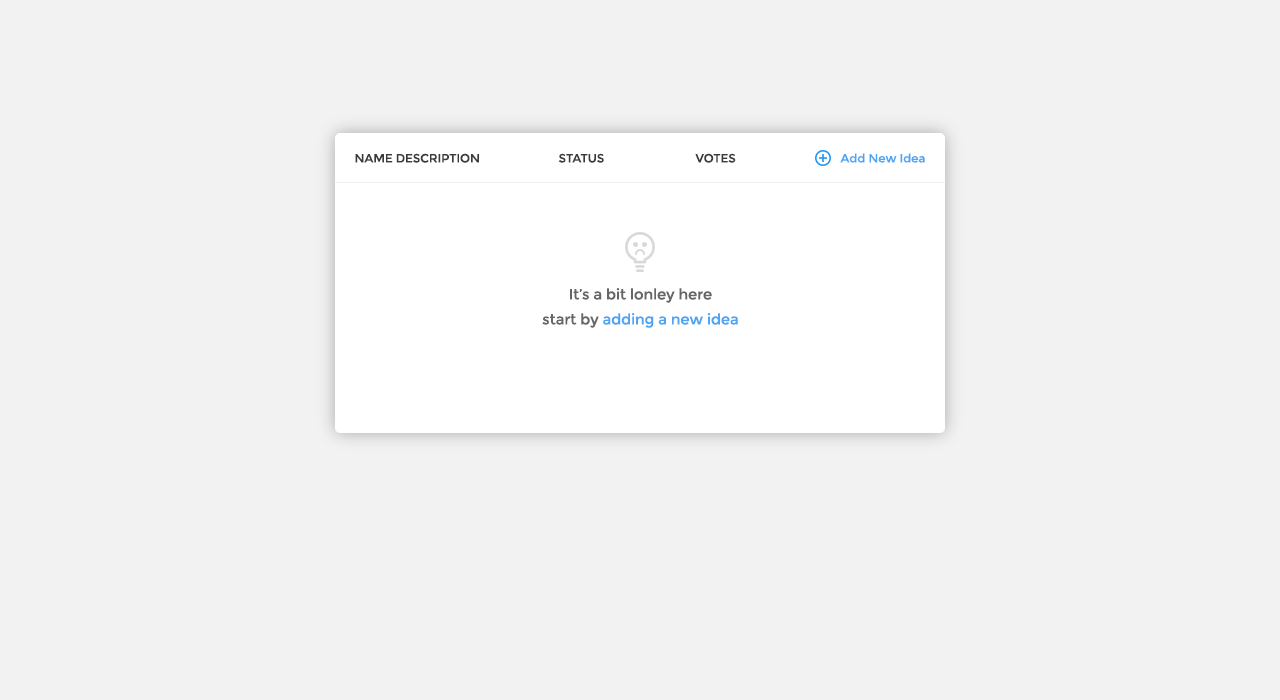
<style>
.page{position:relative;width:1280px;height:700px;background:#f2f2f2}
.page>*{position:absolute;margin:0}
.t1{font:12px "Montserrat-Regular";letter-spacing:-0.01em;color:#3b3b3b;text-transform:uppercase}
.t2{font:12px "Montserrat-Regular";letter-spacing:-0.01em;color:#4ea5f4}
.t3{font:15px/25px "Montserrat-Regular";letter-spacing:-0.01em;color:#666666}
.t4{font:15px/25px "Montserrat-Regular";letter-spacing:-0.01em;color:#4ea5f4}
</style>
<div class="page">
<p class="t1" style="left:355px;top:153px;width:124px;height:10px">Name Description</p>
<p class="t1" style="left:558px;top:153px;width:46px;height:10px">status</p>
<p class="t1" style="left:695px;top:153px;width:41px;height:10px">Votes</p>
<p class="t2" style="left:840px;top:153px;width:85px;height:10px">Add New Idea</p>
<p class="t3" style="left:542px;top:288px;width:196px;height:40px;text-align:center">It’s a bit lonley here<br>start by <span class="t4">adding a new idea</span></p>
</div>
